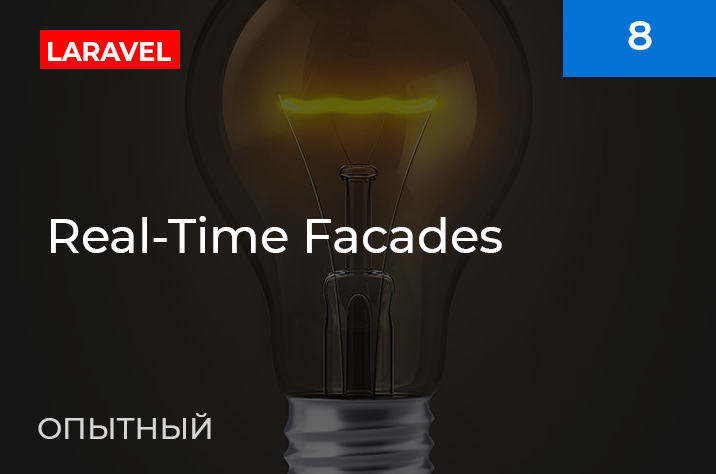
<style>
.page{position:relative;width:716px;height:474px}
.page>*{position:absolute;margin:0}
.t1{font:40px "Montserrat-SemiBold";color:#ffffff}
.t2{font:27px "Montserrat-Bold";color:#ffffff;scale:0.95 1}
.t3{font:48px "Montserrat-Medium";color:#ffffff}
.t4{font:30px "Montserrat-Medium";color:#d5d5d5}
</style>
<div class="page">
<p class="t1" style="left:628px;top:21px;width:24px;height:29px">8</p>
<p class="t2" style="left:48px;top:42px;width:123px;height:19px">LARAVEL</p>
<p class="t3" style="left:51px;top:216px;width:451px;height:37px">Real-Time Facades</p>
<p class="t4" style="left:38px;top:413px;width:173px;height:26px">ОПЫТНЫЙ</p>
</div>
